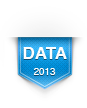
<style>
.page{position:relative;width:87px;height:108px;background:#ffffff}
.page>*{position:absolute;margin:0}
.t1{font:17px "Helvetica-Bold";color:#fefefe}
.t2{font:9.7px "Helvetica";color:#fefefe}
</style>
<div class="page">
<p class="t1" style="left:23px;top:47px;width:44px;height:28px;text-align:center">DATA<br><br><span class="t2">2013</span></p>
</div>
